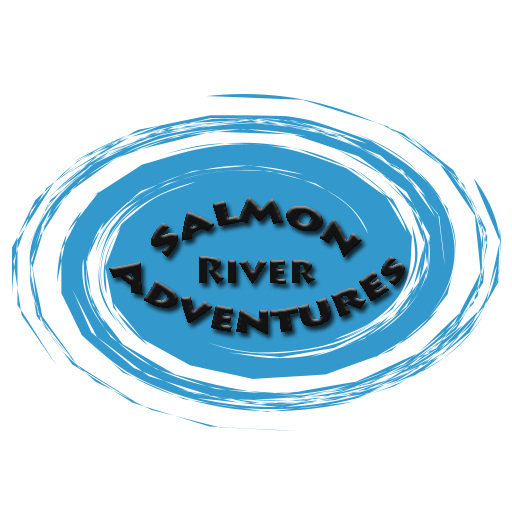
<style>
.page{position:relative;width:512px;height:512px;background:#ffffff}
.page>*{position:absolute;margin:0}
.t1{font:37.5px "LithosPro-Black";color:#131313}
</style>
<div class="page">
<p class="t1" style="left:151px;top:197px;width:211px;height:60px">Salmon</p>
<p class="t1" style="left:109px;top:256px;width:296px;height:78px;text-align:center">Adventures</p>
<p class="t1" style="left:199px;top:256px;width:116px;height:28px">River</p>
</div>
